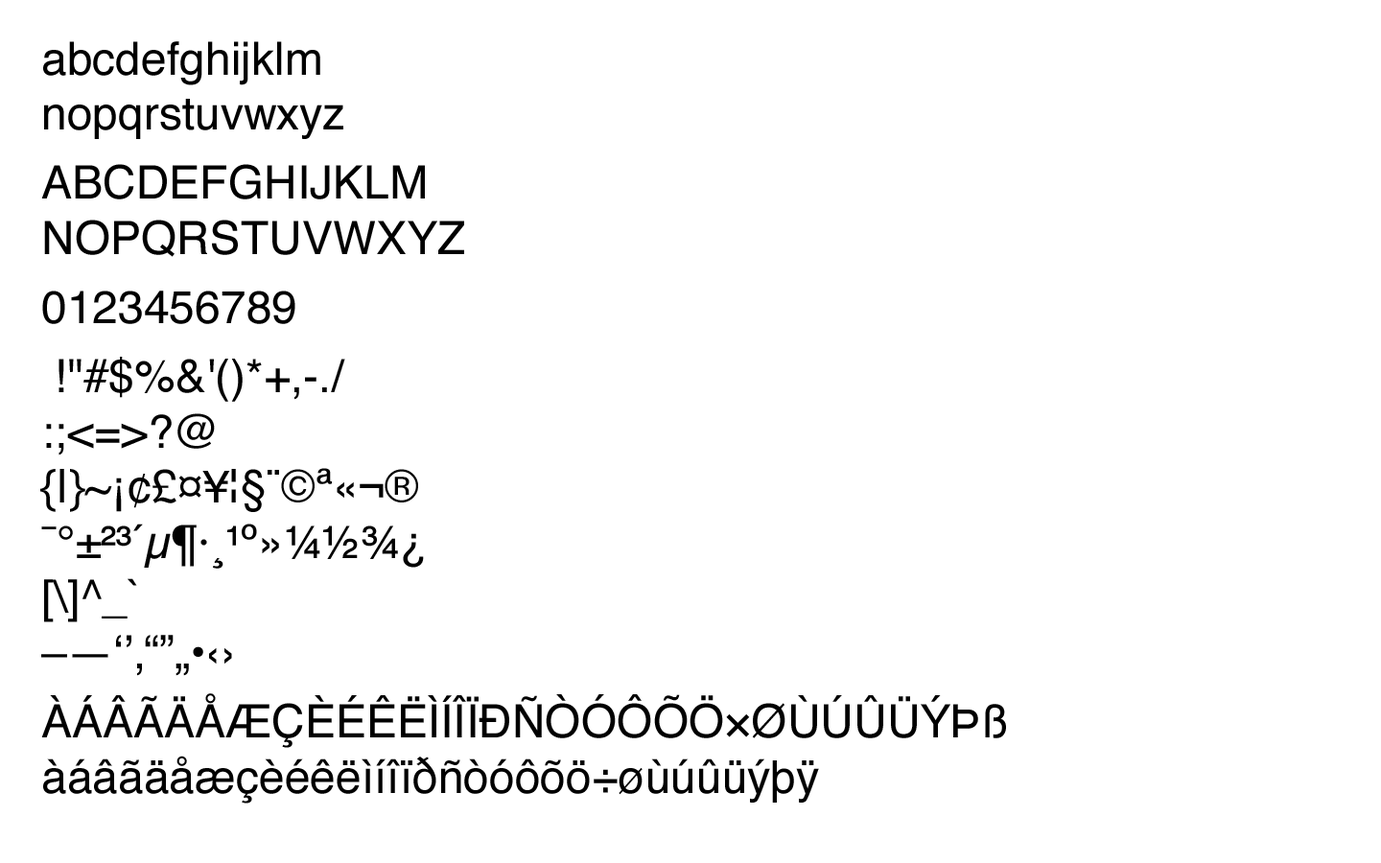
<style>
.page{position:relative;width:1381px;height:863px;background:#ffffff}
.page>*{position:absolute;margin:0}
.t1{font:46px "Helvetica";color:#000000}
.t2{font:46px/69.1px "Helvetica";color:#000000}
</style>
<div class="page">
<p class="t1" style="left:40px;top:41px;width:966px;height:763px">abcdefghijklm<br>nopqrstuvwxyz<br><span class="t2">ABCDEFGHIJKLM<br></span>NOPQRSTUVWXYZ<br><span class="t2">0123456789<br> !"#$%&amp;'()*+,-./<br></span>:;&lt;=&gt;?@<br>{|}~¡¢£¤¥¦§¨©ª«¬®<br>¯°±²³´µ¶·¸¹º»¼½¾¿<br>[\]^_`<br>–—‘’‚“”„•‹›<br><span class="t2">ÀÁÂÃÄÅÆÇÈÉÊËÌÍÎÏÐÑÒÓÔÕÖ×ØÙÚÛÜÝÞß<br></span>àáâãäåæçèéêëìíîïðñòóôõö÷øùúûüýþÿ</p>
</div>
